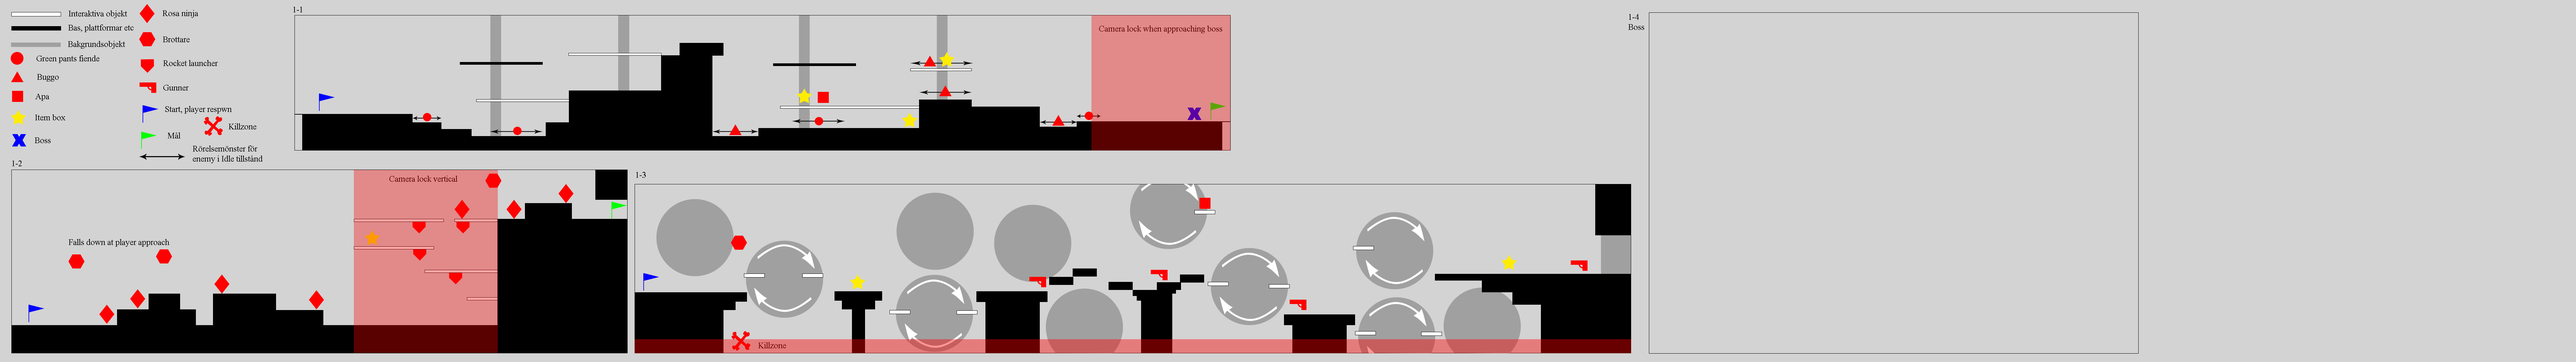
<style>
.page{position:relative;width:2576px;height:362px;background:#d3d3d3}
.page>*{position:absolute;margin:0}
.t1{font:8.4px "TimesNewRomanPSMT";color:#000000}
.t2{font:8.4px "TimesNewRomanPSMT";color:#590000}
.t3{font:8.4px "TimesNewRomanPSMT";color:#690000}
</style>
<div class="page">
<p class="t1" style="left:69px;top:10px;width:58px;height:8px">Interaktiva objekt</p>
<p class="t1" style="left:163px;top:10px;width:35px;height:8px">Rosa ninja</p>
<p class="t1" style="left:293px;top:7px;width:9px;height:5px">1-1</p>
<p class="t1" style="left:1628px;top:14px;width:16px;height:16px">1-4<br>Boss</p>
<p class="t1" style="left:68px;top:24px;width:65px;height:8px">Bas, plattformar etc</p>
<p class="t2" style="left:1099px;top:25px;width:123px;height:8px">Camera lock when approaching boss</p>
<p class="t1" style="left:68px;top:41px;width:57px;height:8px">Bakgrundsobjekt</p>
<p class="t1" style="left:163px;top:37px;width:27px;height:5px">Brottare</p>
<p class="t1" style="left:37px;top:55px;width:62px;height:8px">Green pants fiende</p>
<p class="t1" style="left:163px;top:60px;width:55px;height:6px">Rocket launcher</p>
<p class="t1" style="left:37px;top:74px;width:22px;height:8px">Buggo</p>
<p class="t1" style="left:163px;top:85px;width:26px;height:6px">Gunner</p>
<p class="t1" style="left:35px;top:94px;width:14px;height:7px">Apa</p>
<p class="t1" style="left:165px;top:106px;width:67px;height:8px">Start, player respwn</p>
<p class="t1" style="left:35px;top:114px;width:30px;height:6px">Item box</p>
<p class="t1" style="left:229px;top:123px;width:27px;height:6px">Killzone</p>
<p class="t1" style="left:35px;top:138px;width:16px;height:5px">Boss</p>
<p class="t1" style="left:168px;top:132px;width:12px;height:7px">Mål</p>
<p class="t1" style="left:193px;top:146px;width:70px;height:17px">Rörelsemönster för <br>enemy i Idle tillstånd</p>
<p class="t1" style="left:12px;top:161px;width:10px;height:5px">1-2</p>
<p class="t1" style="left:636px;top:172px;width:10px;height:6px">1-3</p>
<p class="t2" style="left:389px;top:176px;width:69px;height:6px">Camera lock vertical</p>
<p class="t1" style="left:69px;top:239px;width:100px;height:8px">Falls down at player approach</p>
<p class="t3" style="left:758px;top:342px;width:28px;height:6px">Killzone</p>
</div>
